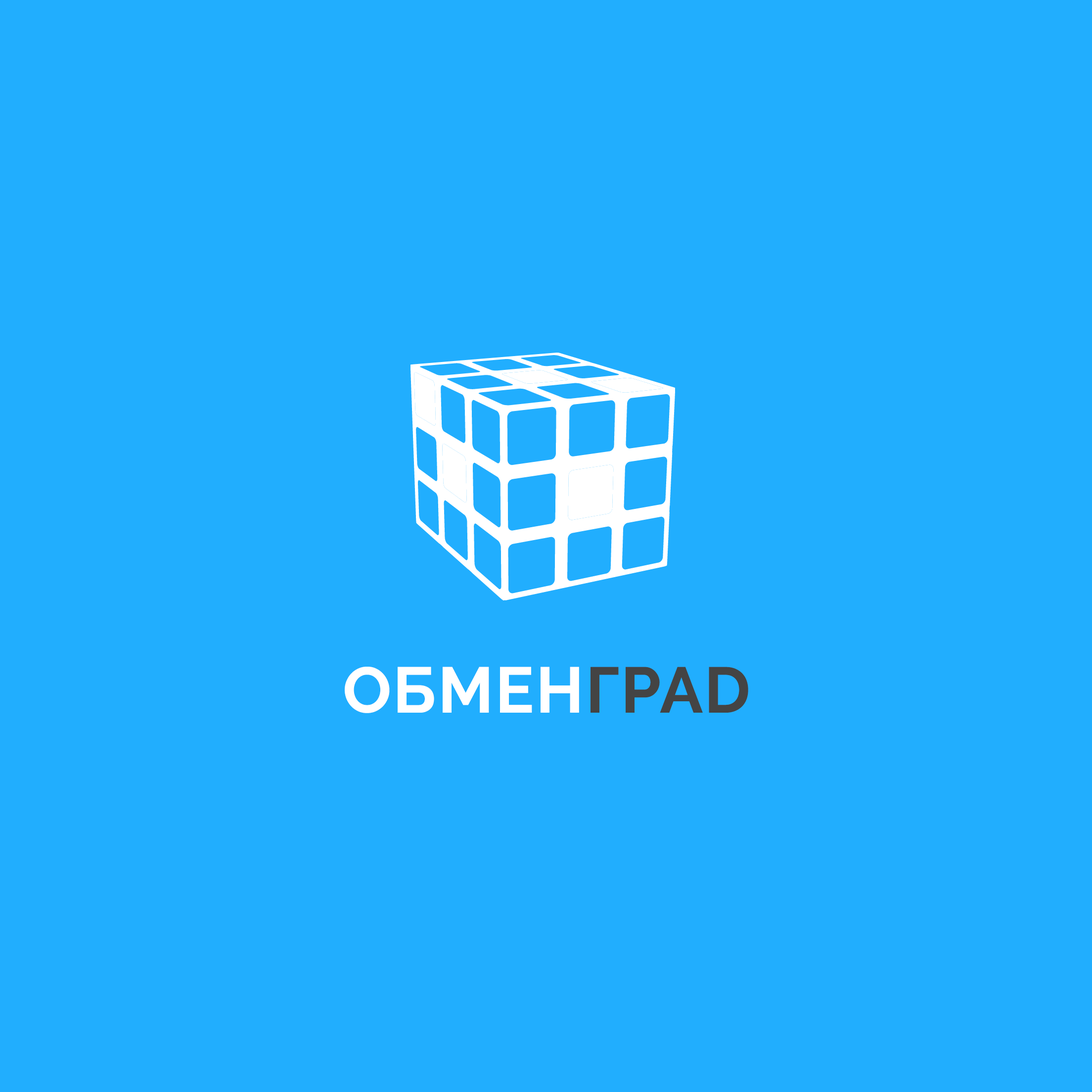
<style>
.page{position:relative;width:1092px;height:1092px;background:#21aefe}
.page>*{position:absolute;margin:0}
.t1{font:64.3px "Raleway-Bold";letter-spacing:0.025em;color:#ffffff}
.t2{font:64.3px "Raleway-Bold";letter-spacing:0.025em;color:#444444}
</style>
<div class="page">
<p class="t1" style="left:345px;top:667px;width:403px;height:46px">ОБМЕН<span class="t2">ГРАD</span></p>
</div>
